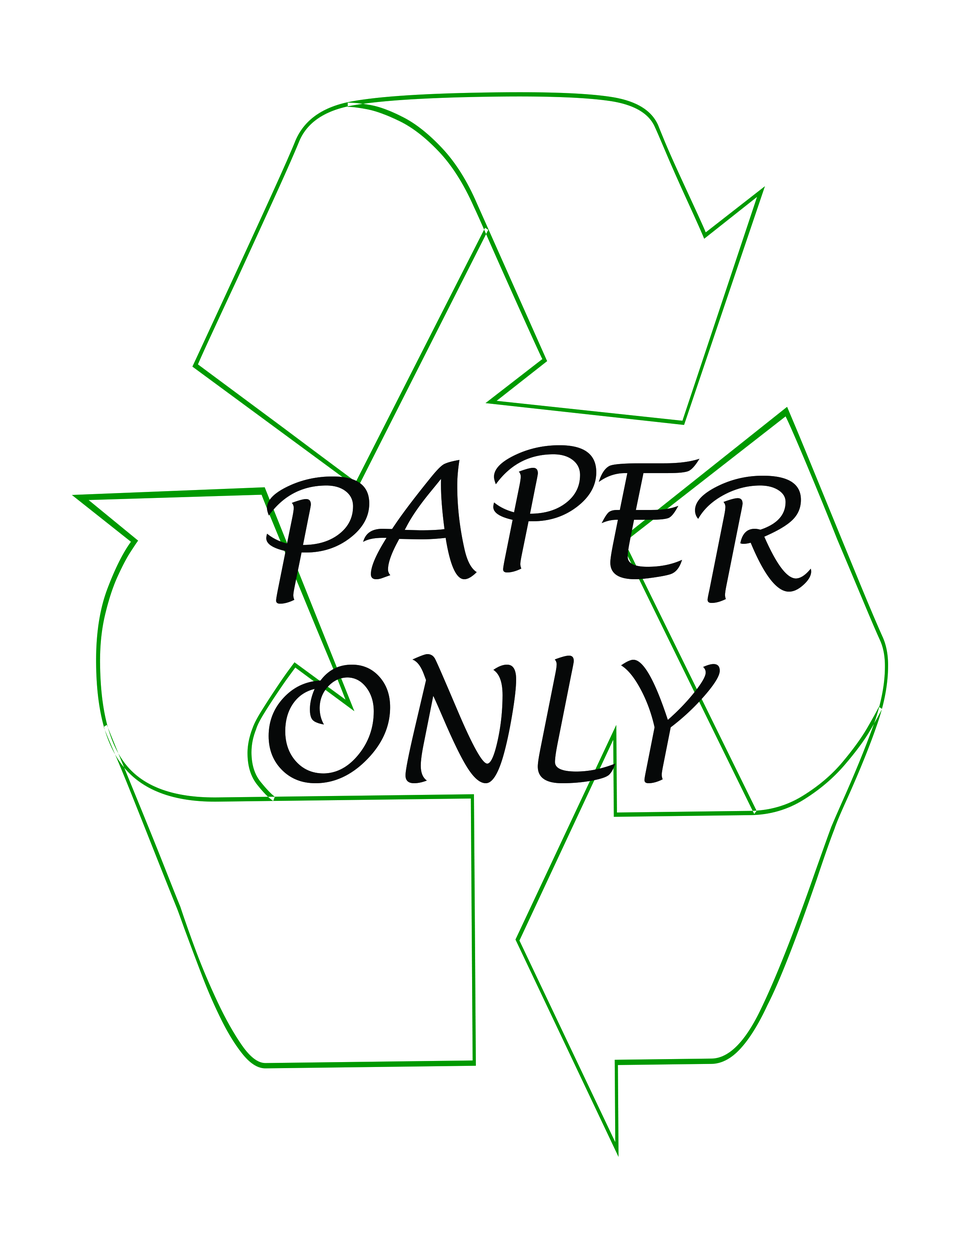
<style>
.page{position:relative;width:960px;height:1242px;background:#ffffff}
.page>*{position:absolute;margin:0}
.t1{font:156.8px "LucidaHandwriting-Italic";color:#060808}
</style>
<div class="page">
<p class="t1" style="left:266px;top:445px;width:545px;height:338px">PAPER<br>ONLY</p>
</div>
